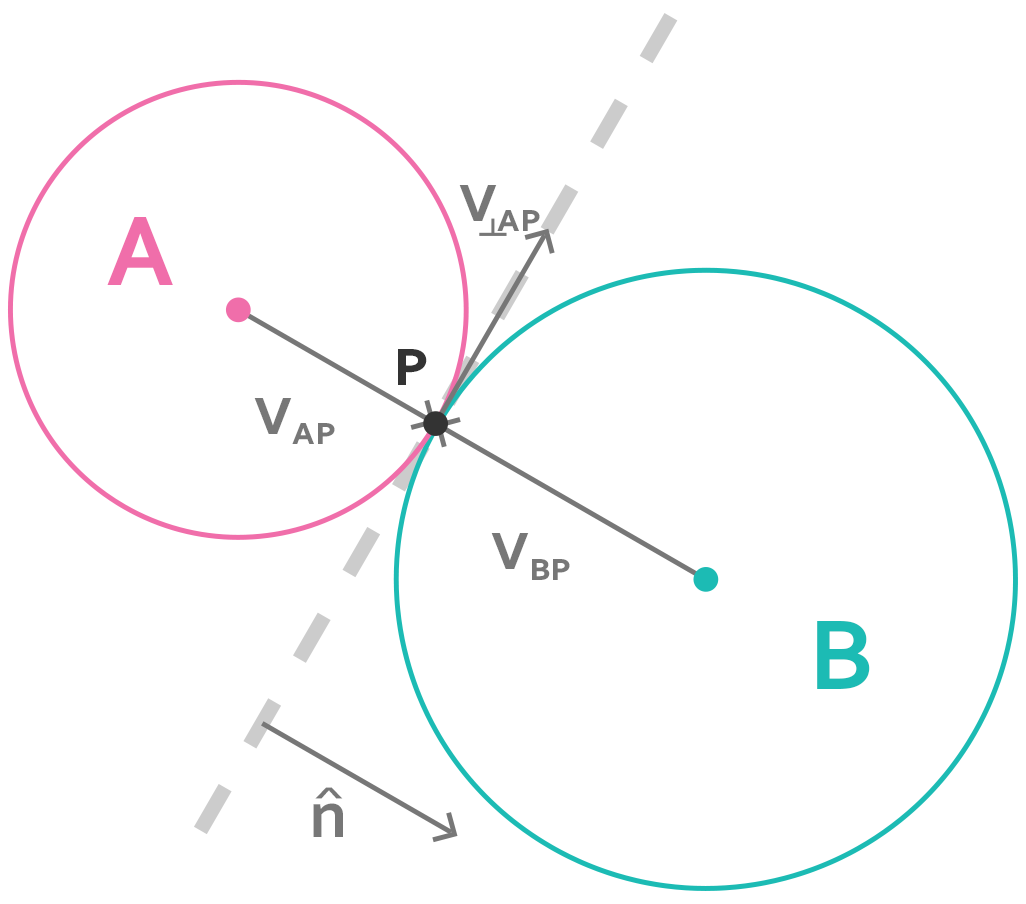
<style>
.page{position:relative;width:1026px;height:904px;background:#ffffff}
.page>*{position:absolute;margin:0}
.t1{font:69.2px "Corbel-Bold";color:#777777;font-variant:small-caps}
.t2{font:103.9px "Corbel-Bold";color:#f06eaa}
.t3{font:69.2px "Corbel-Bold";color:#333333;font-variant:small-caps}
.t4{font:103.9px "Corbel-Bold";color:#1cbbb4}
.t5{font:44.9px "Corbel-Bold";color:#777777;font-variant:small-caps;scale:2.15 1}
.t6{font:69.2px "Corbel-Bold";color:#777777}
</style>
<div class="page">
<p class="t1" style="left:459px;top:185px;width:81px;height:46px">vap</p>
<p class="t2" style="left:107px;top:217px;width:66px;height:68px">A</p>
<p class="t3" style="left:398px;top:349px;width:29px;height:36px">p</p>
<p class="t1" style="left:254px;top:398px;width:81px;height:46px">vap</p>
<p class="t1" style="left:491px;top:533px;width:79px;height:47px">vbp</p>
<p class="t4" style="left:817px;top:621px;width:53px;height:68px">B</p>
<p class="t5" style="left:315px;top:787px;width:28px;height:12px">^</p>
<p class="t6" style="left:313px;top:803px;width:30px;height:34px">n</p>
</div>
